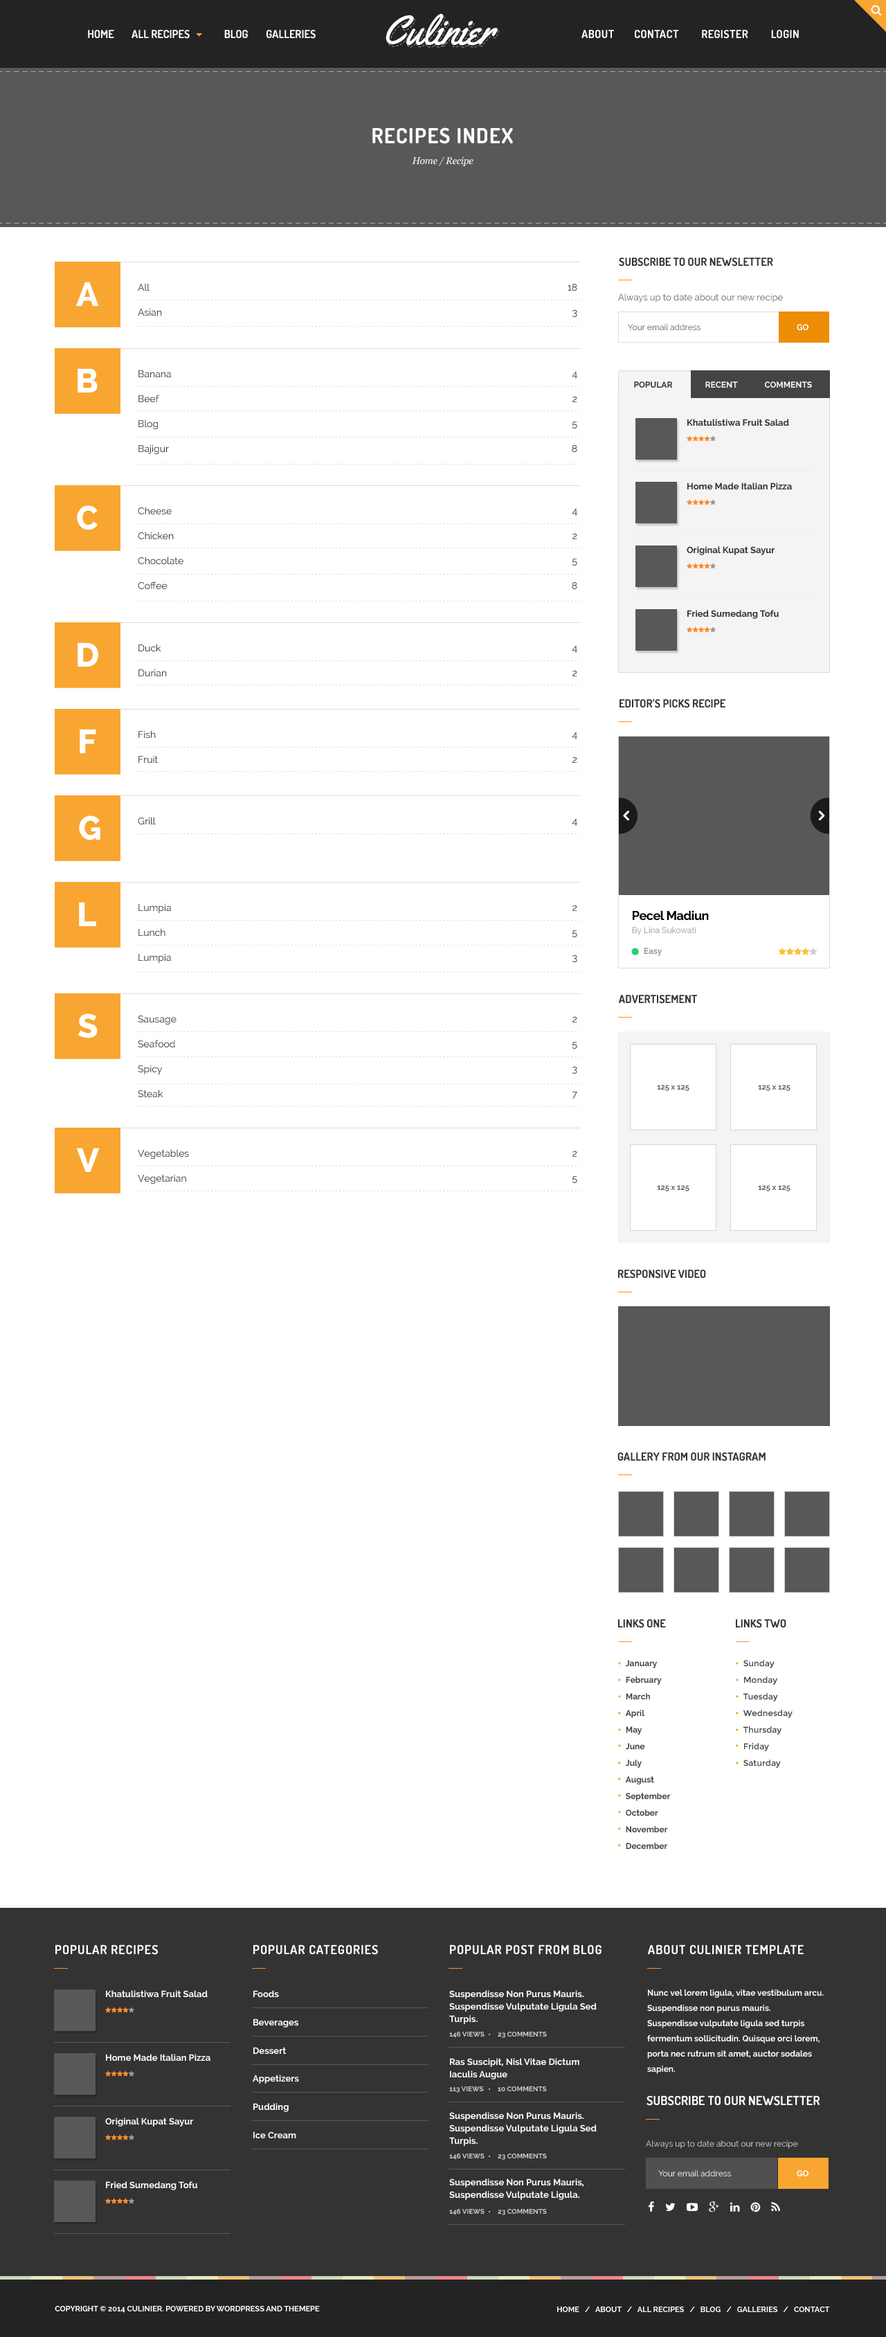
<style>
.page{position:relative;width:886px;height:2337px;background:#ffffff}
.page>*{position:absolute;margin:0}
.t1{font:41.5px "Yellowtail";color:#ffffff}
.t2{font:11.1px "Dosis-Bold";letter-spacing:0.025em;color:#ffffff;text-transform:uppercase}
.t3{font:20.8px "Dosis-Bold";letter-spacing:0.05em;color:#ffffff;text-transform:uppercase}
.t4{font:9.7px "Georgia-Italic";letter-spacing:-0.025em;color:#ffffff}
.t5{font:11.1px "Dosis-Bold";letter-spacing:0.005em;color:#333333;text-transform:uppercase}
.t6{font:33.2px "Raleway-ExtraBold";letter-spacing:0.05em;color:#ffffff}
.t7{font:9.7px/24.9px "Raleway";color:#333333}
.t8{font:9px "Raleway";color:#656565}
.t9{font:8.3px "Raleway";color:#656565}
.t10{font:8.3px "Raleway-Bold";color:#ffffff}
.t11{font:8.3px "Raleway-Bold";color:#333333}
.t12{font:9px "Raleway-Bold";color:#333333}
.t13{font:9.7px "Raleway";color:#333333}
.t14{font:12.5px "Raleway-Bold";letter-spacing:-0.025em;color:#000000}
.t15{font:8.3px "Raleway";color:#999999}
.t16{font:8.3px "Raleway-Bold";color:#999999}
.t17{font:7.6px "Raleway-Bold";color:#666666}
.t18{font:8.3px/16.6px "Raleway-Bold";color:#444444}
.t19{font:8.3px/16.6px "Montserrat-Regular";color:#444444}
.t20{font:12.5px "Dosis-Bold";letter-spacing:0.05em;color:#ffffff;text-transform:uppercase}
.t21{font:9px "Raleway-Bold";color:#ffffff}
.t22{font:9px/12.5px "Raleway-Bold";color:#ffffff}
.t23{font:8.3px/15.2px "Raleway-Bold";color:#ffffff}
.t24{font:6.9px "Raleway-Bold";color:#cccccc;text-transform:uppercase}
.t25{font:12.5px "Dosis-Bold";letter-spacing:0.005em;color:#ffffff;text-transform:uppercase}
.t26{font:8.3px "Raleway";color:#dcdcdc}
.t27{font:8.3px "Raleway";color:#ffffff}
.t28{font:7.6px "Raleway-Bold";color:#ffffff}
.t29{font:7.6px "Raleway-Bold";color:#ffffff;text-transform:uppercase}
</style>
<div class="page">
<p class="t1" style="left:386px;top:14px;width:112px;height:32px">Culinier</p>
<p class="t2" style="left:582px;top:30px;width:217px;height:9px">ABOUT        CONTACT         Register         login</p>
<p class="t3" style="left:372px;top:127px;width:141px;height:17px">RECIPES INDEX</p>
<p class="t4" style="left:412px;top:156px;width:62px;height:10px">Home / Recipe</p>
<p class="t5" style="left:619px;top:258px;width:154px;height:9px">Subscribe to our newsletter</p>
<p class="t6" style="left:76px;top:282px;width:23px;height:24px">A</p>
<p class="t7" style="left:138px;top:283px;width:24px;height:33px">All<br>Asian</p>
<p class="t7" style="left:568px;top:284px;width:9px;height:33px;text-align:right">18<br>3</p>
<p class="t8" style="left:618px;top:294px;width:165px;height:9px">Always up to date about our new recipe</p>
<p class="t9" style="left:628px;top:324px;width:73px;height:6px">Your email address</p>
<p class="t10" style="left:797px;top:324px;width:12px;height:6px">GO</p>
<p class="t6" style="left:78px;top:368px;width:20px;height:25px">B</p>
<p class="t7" style="left:138px;top:370px;width:33px;height:84px">Banana<br>Beef<br>Blog<br>Bajigur</p>
<p class="t7" style="left:572px;top:371px;width:5px;height:82px;text-align:right">4<br>2<br>5<br>8</p>
<p class="t11" style="left:634px;top:381px;width:39px;height:7px">POPULAR</p>
<p class="t10" style="left:705px;top:381px;width:33px;height:7px">RECENT</p>
<p class="t10" style="left:765px;top:381px;width:47px;height:7px">COMMENTS</p>
<p class="t12" style="left:687px;top:419px;width:102px;height:7px">Khatulistiwa Fruit Salad</p>
<p class="t12" style="left:687px;top:483px;width:105px;height:7px">Home Made Italian Pizza</p>
<p class="t6" style="left:77px;top:505px;width:21px;height:25px">C</p>
<p class="t7" style="left:138px;top:507px;width:45px;height:83px">Cheese<br>Chicken<br>Chocolate<br>Coffee</p>
<p class="t7" style="left:572px;top:508px;width:5px;height:82px;text-align:right">4<br>2<br>5<br>8</p>
<p class="t12" style="left:687px;top:546px;width:88px;height:9px">Original Kupat Sayur</p>
<p class="t12" style="left:687px;top:610px;width:92px;height:9px">Fried Sumedang Tofu</p>
<p class="t6" style="left:78px;top:642px;width:20px;height:25px">D</p>
<p class="t7" style="left:138px;top:644px;width:29px;height:33px">Duck<br>Durian</p>
<p class="t7" style="left:572px;top:645px;width:5px;height:31px;text-align:right">4<br>2</p>
<p class="t5" style="left:620px;top:699px;width:106px;height:9px">EDITOR’S PICKS RECIPE</p>
<p class="t6" style="left:80px;top:729px;width:16px;height:24px">F</p>
<p class="t7" style="left:138px;top:730px;width:20px;height:34px">Fish<br>Fruit</p>
<p class="t7" style="left:572px;top:732px;width:5px;height:31px;text-align:right">4<br>2</p>
<p class="t6" style="left:79px;top:816px;width:21px;height:24px">G</p>
<p class="t13" style="left:138px;top:817px;width:18px;height:8px">Grill</p>
<p class="t13" style="left:572px;top:818px;width:5px;height:8px">4</p>
<p class="t6" style="left:79px;top:902px;width:17px;height:24px">L</p>
<p class="t7" style="left:138px;top:903px;width:33px;height:60px">Lumpia<br>Lunch<br>Lumpia</p>
<p class="t7" style="left:572px;top:905px;width:5px;height:57px;text-align:right">2<br>5<br>3</p>
<p class="t14" style="left:633px;top:910px;width:76px;height:11px">Pecel Madiun</p>
<p class="t15" style="left:632px;top:927px;width:64px;height:8px">By Lina Sukowati</p>
<p class="t16" style="left:644px;top:948px;width:19px;height:8px">Easy</p>
<p class="t5" style="left:619px;top:995px;width:78px;height:9px">ADVERTISEMENT</p>
<p class="t6" style="left:78px;top:1014px;width:20px;height:24px">S</p>
<p class="t7" style="left:138px;top:1016px;width:39px;height:82px">Sausage<br>Seafood<br>Spicy<br>Steak</p>
<p class="t7" style="left:572px;top:1016px;width:5px;height:83px;text-align:right">2<br>5<br>3<br>7</p>
<p class="t17" style="left:657px;top:1085px;width:33px;height:6px">125 x 125</p>
<p class="t17" style="left:758px;top:1085px;width:33px;height:6px">125 x 125</p>
<p class="t6" style="left:76px;top:1148px;width:24px;height:24px">V</p>
<p class="t7" style="left:138px;top:1149px;width:51px;height:35px">Vegetables<br>Vegetarian</p>
<p class="t7" style="left:572px;top:1151px;width:5px;height:32px;text-align:right">2<br>5</p>
<p class="t17" style="left:657px;top:1185px;width:33px;height:6px">125 x 125</p>
<p class="t17" style="left:758px;top:1185px;width:33px;height:6px">125 x 125</p>
<p class="t5" style="left:618px;top:1270px;width:88px;height:9px">RESPONSIVE VIDEO</p>
<p class="t5" style="left:618px;top:1452px;width:148px;height:9px">GALLERY FROM OUR INSTAGRAM</p>
<p class="t5" style="left:618px;top:1619px;width:48px;height:9px">LINKS One</p>
<p class="t5" style="left:736px;top:1619px;width:50px;height:9px">LINKS TWO</p>
<p class="t18" style="left:625px;top:1660px;width:46px;height:189px">January<br>February<br>March<br>April<br>May<br>June<br>July<br>August<br>September<br>October<br>November<br>December</p>
<p class="t19" style="left:744px;top:1660px;width:49px;height:108px">Sunday<br>Monday<br>Tuesday<br>Wednesday<br>Thursday<br>Friday<br>Saturday</p>
<p class="t20" style="left:55px;top:1945px;width:103px;height:10px">POPULAR RECIPES</p>
<p class="t20" style="left:253px;top:1945px;width:125px;height:10px">POPULAR CATEGORIES</p>
<p class="t20" style="left:450px;top:1945px;width:152px;height:10px">POPULAR Post from blog</p>
<p class="t20" style="left:648px;top:1945px;width:156px;height:9px">About CULINIER Template</p>
<p class="t21" style="left:106px;top:1990px;width:102px;height:8px">Khatulistiwa Fruit Salad</p>
<p class="t21" style="left:253px;top:1990px;width:26px;height:8px">Foods</p>
<p class="t22" style="left:449px;top:1990px;width:148px;height:34px">Suspendisse Non Purus Mauris. <br>Suspendisse Vulputate Ligula Sed <br>Turpis.</p>
<p class="t23" style="left:647px;top:1990px;width:177px;height:84px">Nunc vel lorem ligula, vitae vestibulum arcu. Suspendisse non purus mauris. <br>Suspendisse vulputate ligula sed turpis fermentum sollicitudin. Quisque orci lorem, porta nec rutrum sit amet, auctor sodales sapien.</p>
<p class="t21" style="left:253px;top:2019px;width:45px;height:9px">Beverages</p>
<p class="t24" style="left:449px;top:2032px;width:36px;height:6px">146 Views</p>
<p class="t24" style="left:498px;top:2032px;width:49px;height:6px">23 Comments</p>
<p class="t21" style="left:106px;top:2054px;width:104px;height:8px">Home Made Italian Pizza</p>
<p class="t21" style="left:253px;top:2047px;width:34px;height:8px">Dessert</p>
<p class="t22" style="left:450px;top:2058px;width:129px;height:22px">Ras Suscipit, Nisl Vitae Dictum <br>Iaculis Augue</p>
<p class="t21" style="left:253px;top:2075px;width:46px;height:9px">Appetizers</p>
<p class="t24" style="left:449px;top:2087px;width:35px;height:6px">113 Views</p>
<p class="t24" style="left:498px;top:2087px;width:49px;height:4px">10 Comments</p>
<p class="t21" style="left:253px;top:2103px;width:36px;height:9px">Pudding</p>
<p class="t25" style="left:647px;top:2096px;width:173px;height:10px">Subscribe to our newsletter</p>
<p class="t21" style="left:105px;top:2118px;width:88px;height:9px">Original Kupat Sayur</p>
<p class="t22" style="left:449px;top:2112px;width:148px;height:34px">Suspendisse Non Purus Mauris. <br>Suspendisse Vulputate Ligula Sed <br>Turpis.</p>
<p class="t21" style="left:253px;top:2132px;width:43px;height:7px">Ice Cream</p>
<p class="t26" style="left:646px;top:2141px;width:152px;height:8px">Always up to date about our new recipe</p>
<p class="t24" style="left:449px;top:2154px;width:36px;height:6px">146 Views</p>
<p class="t24" style="left:498px;top:2154px;width:49px;height:6px">23 Comments</p>
<p class="t27" style="left:658px;top:2170px;width:73px;height:7px">Your email address</p>
<p class="t10" style="left:797px;top:2170px;width:12px;height:7px">GO</p>
<p class="t21" style="left:106px;top:2181px;width:91px;height:9px">Fried Sumedang Tofu</p>
<p class="t22" style="left:449px;top:2179px;width:135px;height:21px">Suspendisse Non Purus Mauris, <br>Suspendisse Vulputate Ligula.</p>
<p class="t24" style="left:449px;top:2209px;width:36px;height:6px">146 Views</p>
<p class="t24" style="left:498px;top:2209px;width:49px;height:6px">23 Comments</p>
<p class="t28" style="left:55px;top:2306px;width:265px;height:7px">COPYRIGHT © 2014 CULINIER. POWERED BY WORDPRESS AND THEMEPE</p>
<p class="t29" style="left:557px;top:2307px;width:273px;height:5px">Home   /   About   /   All Recipes   /   Blog   /   Galleries   /   Contact</p>
</div>
